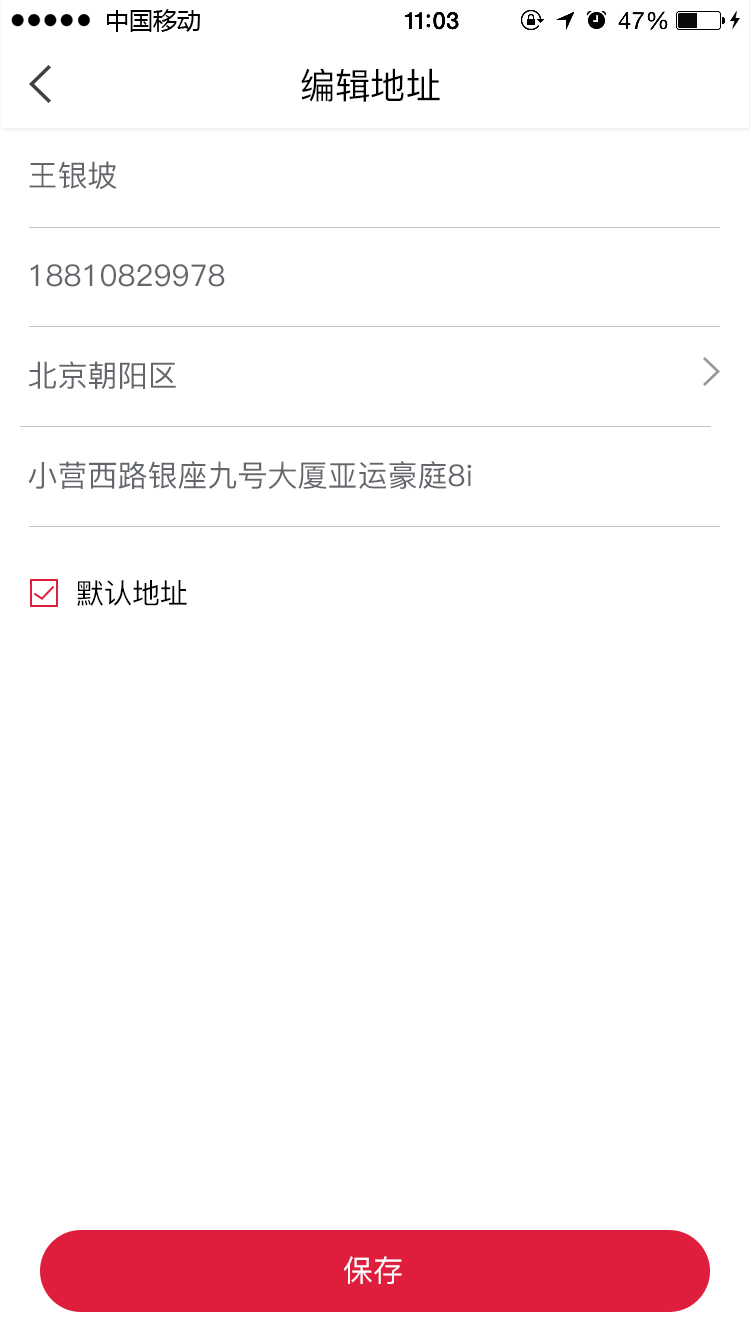
<style>
.page{position:relative;width:750px;height:1334px;background:#ffffff}
.page>*{position:absolute;margin:0}
.t1{font:35.7px "PingFang-SC-Medium";color:#000000}
.t2{font:30px/100px "PingFang-SC-Medium";color:#63666b}
.t3{font:28px "PingFang-SC-Medium";color:#000000}
.t4{font:30px "PingFang-SC-Medium";color:#ffffff}
</style>
<div class="page">
<p class="t1" style="left:301px;top:68px;width:139px;height:34px">编辑地址</p>
<p class="t2" style="left:28px;top:161px;width:444px;height:328px">王银坡<br>18810829978<br>北京朝阳区<br>小营西路银座九号大厦亚运豪庭8i</p>
<p class="t3" style="left:77px;top:580px;width:110px;height:26px">默认地址</p>
<p class="t4" style="left:344px;top:1256px;width:58px;height:28px">保存</p>
</div>
